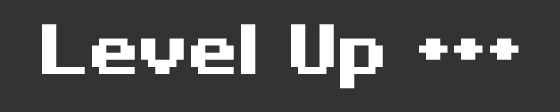
<style>
.page{position:relative;width:560px;height:112px;background:#333333}
.page>*{position:absolute;margin:0}
.t1{font:64px "PixeloidSans-Bold";color:#ffffff}
</style>
<div class="page">
<p class="t1" style="left:42px;top:24px;width:477px;height:65px">Level Up +++</p>
</div>
